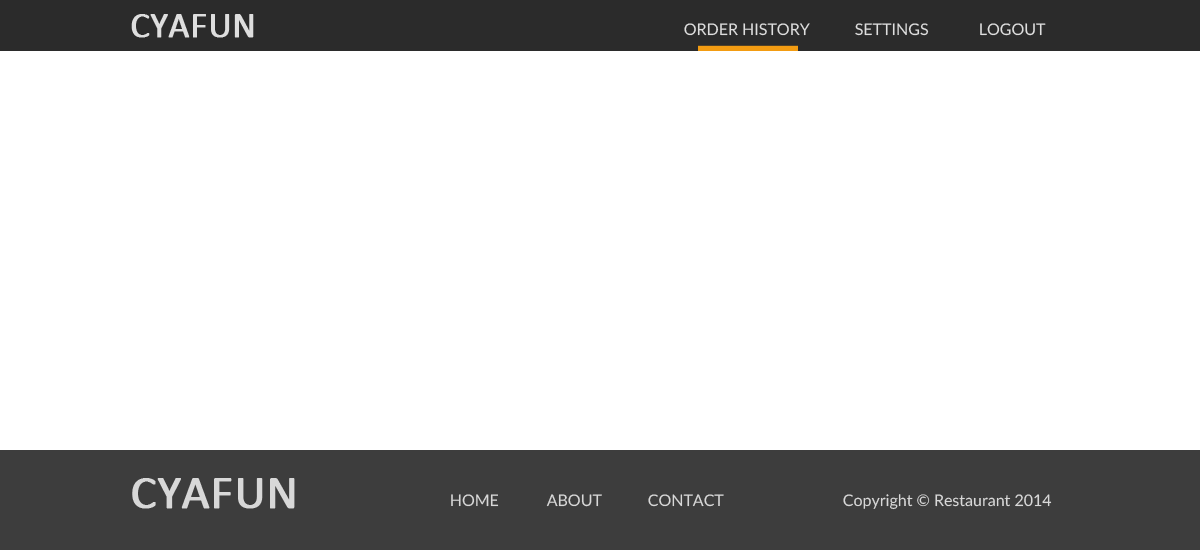
<style>
.page{position:relative;width:1200px;height:550px;background:#ffffff}
.page>*{position:absolute;margin:0}
.t1{font:36px "Calibri";color:#dedede;font-weight:bold}
.t2{font:16px "Lato-Regular";color:#dedede}
.t3{font:48px "Calibri";color:#d8d8d8;font-weight:bold}
.t4{font:16px "Lato-Regular";color:#d8d8d8}
</style>
<div class="page">
<p class="t1" style="left:131px;top:14px;width:123px;height:24px">CYAFUN</p>
<p class="t2" style="left:684px;top:23px;width:126px;height:13px">ORDER HISTORY</p>
<p class="t2" style="left:855px;top:23px;width:74px;height:13px">SETTINGS</p>
<p class="t2" style="left:980px;top:23px;width:66px;height:13px">LOGOUT</p>
<p class="t3" style="left:132px;top:478px;width:163px;height:31px">CYAFUN</p>
<p class="t4" style="left:451px;top:494px;width:48px;height:13px">HOME</p>
<p class="t4" style="left:546px;top:494px;width:56px;height:13px">ABOUT</p>
<p class="t4" style="left:648px;top:494px;width:76px;height:13px">CONTACT</p>
<p class="t4" style="left:843px;top:494px;width:209px;height:16px">Copyright © Restaurant 2014</p>
</div>
